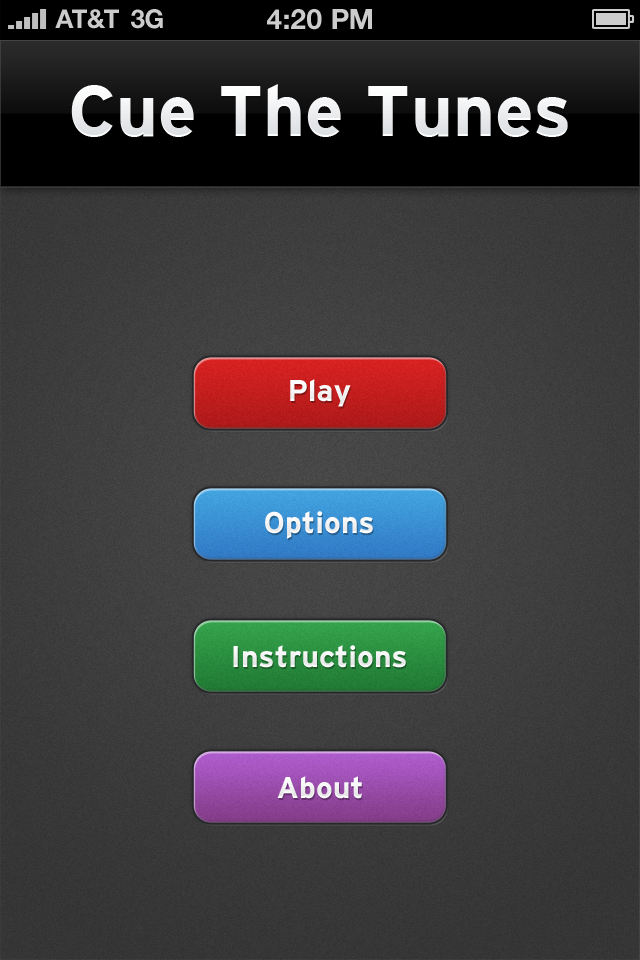
<style>
.page{position:relative;width:640px;height:960px}
.page>*{position:absolute;margin:0}
.t1{font:26px "HelveticaNeue-Bold";color:#cccccc;text-transform:uppercase}
.t2{font:28px "HelveticaNeue-Bold";color:#cccccc;text-transform:uppercase}
.t3{font:72px "Interstate-Bold";color:#ffffff}
.t4{font:30px "Interstate-Bold";letter-spacing:0.005em;color:#ffffff}
</style>
<div class="page">
<p class="t1" style="left:55px;top:9px;width:64px;height:20px">AT&amp;T</p>
<p class="t1" style="left:131px;top:9px;width:32px;height:20px">3G</p>
<p class="t2" style="left:267px;top:9px;width:105px;height:21px">4:20 pM</p>
<p class="t3" style="left:71px;top:84px;width:497px;height:53px">Cue The Tunes</p>
<p class="t4" style="left:290px;top:379px;width:61px;height:28px">Play</p>
<p class="t4" style="left:265px;top:511px;width:108px;height:28px">Options</p>
<p class="t4" style="left:233px;top:645px;width:173px;height:23px">Instructions</p>
<p class="t4" style="left:277px;top:776px;width:85px;height:23px">About</p>
</div>
